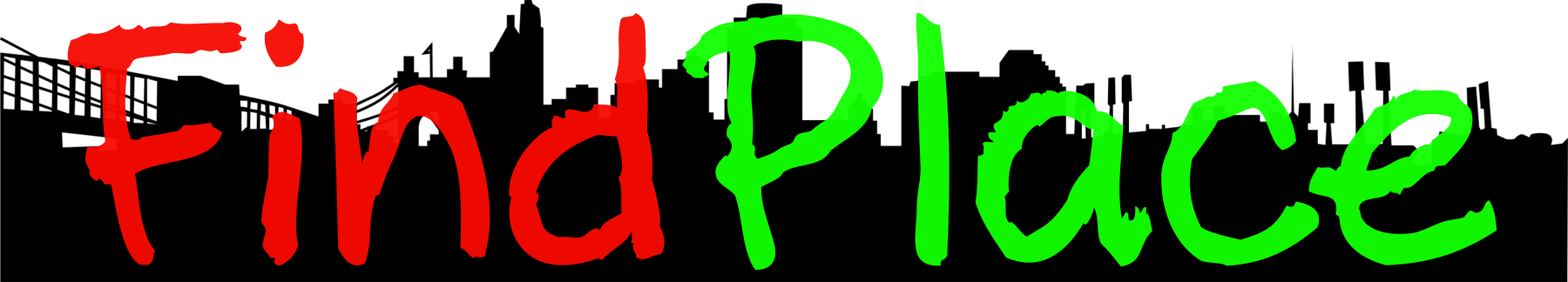
<style>
.page{position:relative;width:1568px;height:282px;background:#000000}
.page>*{position:absolute;margin:0}
.t1{font:324.1px "AxureHandwriting";color:#11ff00}
.t2{font:324.1px "AxureHandwriting";color:#f50900}
</style>
<div class="page">
<p class="t1" style="left:67px;top:12px;width:1430px;height:258px;opacity:0.95"><span class="t2">Find</span>Place</p>
</div>
